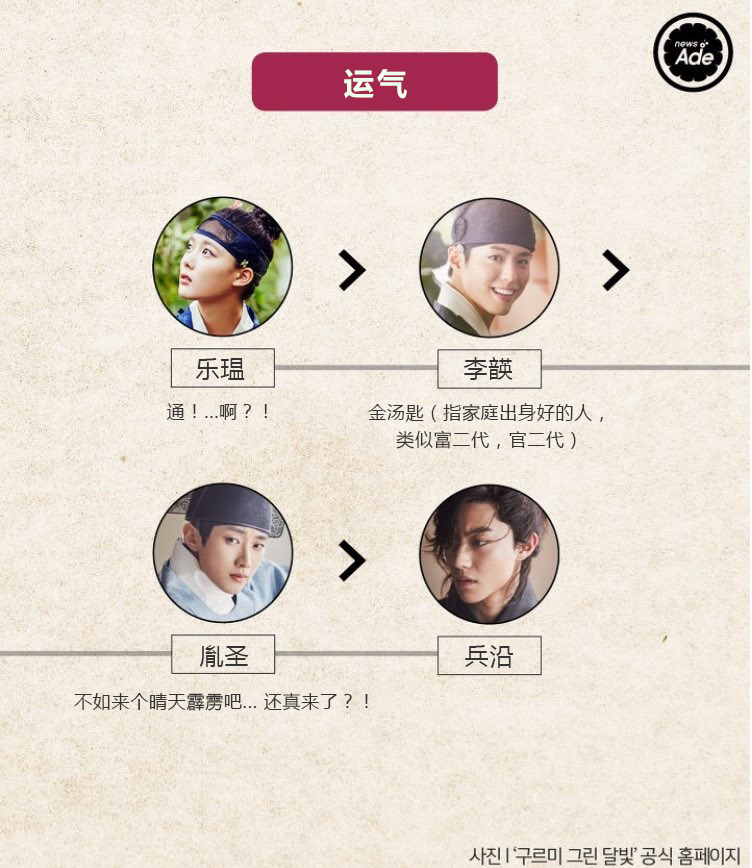
<style>
.page{position:relative;width:752px;height:868px}
.page>*{position:absolute;margin:0}
.t1{font:32px "FZLTCHK--GBK1-0";letter-spacing:0.04em;color:#efffee}
.t2{font:24px "MicrosoftYaHei";letter-spacing:0.04em;color:#333333}
.t3{font:18px "MicrosoftYaHei";letter-spacing:0.04em;color:#333333}
.t4{font:18px/26.7px "MicrosoftYaHei";letter-spacing:0.04em;color:#333333}
</style>
<div class="page">
<p class="t1" style="left:344px;top:69px;width:63px;height:30px">运气</p>
<p class="t2" style="left:196px;top:358px;width:49px;height:22px">乐瑥</p>
<p class="t2" style="left:463px;top:357px;width:50px;height:23px">李韺</p>
<p class="t3" style="left:167px;top:403px;width:100px;height:17px">通！...啊？！</p>
<p class="t4" style="left:368px;top:403px;width:235px;height:46px;text-align:center">金汤匙（指家庭出身好的人，<br>类似富二代，官二代）</p>
<p class="t2" style="left:199px;top:645px;width:50px;height:22px">胤圣</p>
<p class="t2" style="left:465px;top:645px;width:49px;height:23px">兵沿</p>
<p class="t3" style="left:74px;top:692px;width:294px;height:19px">不如来个晴天霹雳吧... 还真来了？！</p>
</div>
